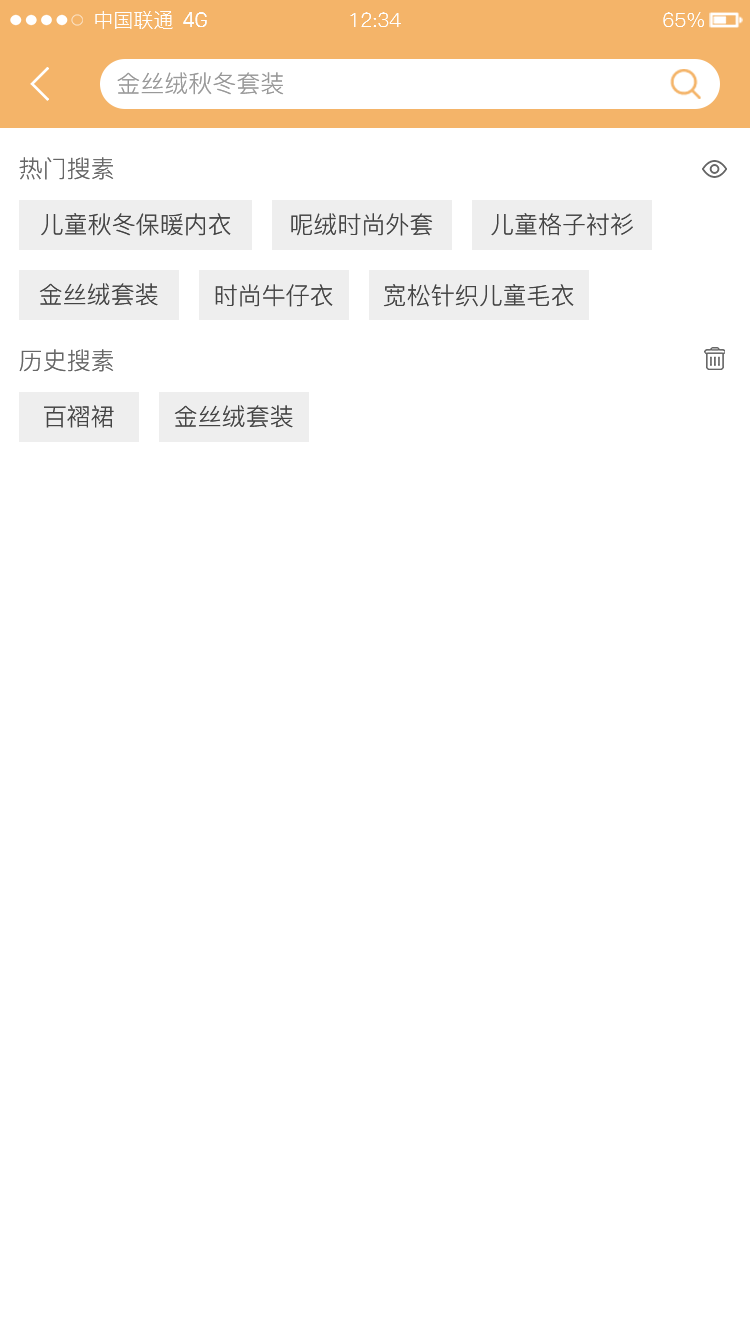
<style>
.page{position:relative;width:750px;height:1334px;background:#ffffff}
.page>*{position:absolute;margin:0}
.t1{font:20px "PingFang-SC-Regular";color:#fefefe}
.t2{font:20px "SanFranciscoDisplay";color:#fefefe}
.t3{font:24px "PingFang-SC-Regular";color:#999999}
.t4{font:24px "PingFang-SC-Regular";color:#666666}
.t5{font:24px "PingFang-SC-Regular";color:#444444}
</style>
<div class="page">
<p class="t1" style="left:95px;top:11px;width:78px;height:18px">中国联通</p>
<p class="t2" style="left:183px;top:12px;width:24px;height:15px">4G</p>
<p class="t1" style="left:350px;top:12px;width:51px;height:15px">12:34</p>
<p class="t1" style="left:663px;top:12px;width:41px;height:15px">65%</p>
<p class="t3" style="left:117px;top:72px;width:167px;height:23px">金丝绒秋冬套装</p>
<p class="t4" style="left:19px;top:157px;width:95px;height:23px">热门搜素</p>
<p class="t5" style="left:41px;top:213px;width:190px;height:23px">儿童秋冬保暖内衣</p>
<p class="t5" style="left:291px;top:213px;width:142px;height:23px">呢绒时尚外套</p>
<p class="t5" style="left:491px;top:213px;width:142px;height:23px">儿童格子衬衫</p>
<p class="t5" style="left:39px;top:283px;width:119px;height:23px">金丝绒套装</p>
<p class="t5" style="left:215px;top:284px;width:118px;height:23px">时尚牛仔衣</p>
<p class="t5" style="left:383px;top:284px;width:191px;height:23px">宽松针织儿童毛衣</p>
<p class="t4" style="left:19px;top:349px;width:95px;height:23px">历史搜素</p>
<p class="t5" style="left:44px;top:405px;width:70px;height:23px">百褶裙</p>
<p class="t5" style="left:174px;top:405px;width:119px;height:23px">金丝绒套装</p>
</div>
